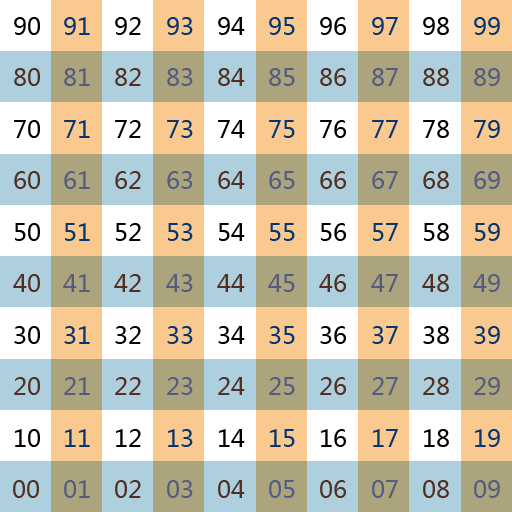
<style>
.page{position:relative;width:512px;height:512px;background:#ffffff}
.page>*{position:absolute;margin:0}
.t1{font:24px "MicrosoftYaHei";color:#000000}
.t2{font:24px "MicrosoftYaHei";color:#05366f}
.t3{font:24px "MicrosoftYaHei";color:#512f21}
.t4{font:24px "MicrosoftYaHei";color:#545b82}
</style>
<div class="page">
<p class="t1" style="left:14px;top:17px;width:26px;height:18px">90</p>
<p class="t2" style="left:64px;top:17px;width:26px;height:18px">91</p>
<p class="t1" style="left:115px;top:17px;width:26px;height:18px">92</p>
<p class="t2" style="left:167px;top:17px;width:26px;height:18px">93</p>
<p class="t1" style="left:218px;top:17px;width:27px;height:18px">94</p>
<p class="t2" style="left:269px;top:17px;width:26px;height:18px">95</p>
<p class="t1" style="left:320px;top:17px;width:26px;height:18px">96</p>
<p class="t2" style="left:372px;top:17px;width:26px;height:18px">97</p>
<p class="t1" style="left:423px;top:17px;width:26px;height:18px">98</p>
<p class="t2" style="left:474px;top:17px;width:26px;height:18px">99</p>
<p class="t3" style="left:14px;top:68px;width:26px;height:18px">80</p>
<p class="t4" style="left:64px;top:68px;width:26px;height:18px">81</p>
<p class="t3" style="left:115px;top:68px;width:26px;height:18px">82</p>
<p class="t4" style="left:167px;top:68px;width:26px;height:18px">83</p>
<p class="t3" style="left:218px;top:68px;width:27px;height:18px">84</p>
<p class="t4" style="left:269px;top:68px;width:26px;height:18px">85</p>
<p class="t3" style="left:320px;top:68px;width:26px;height:18px">86</p>
<p class="t4" style="left:372px;top:68px;width:26px;height:18px">87</p>
<p class="t3" style="left:423px;top:68px;width:26px;height:18px">88</p>
<p class="t4" style="left:474px;top:68px;width:26px;height:18px">89</p>
<p class="t1" style="left:14px;top:120px;width:26px;height:18px">70</p>
<p class="t2" style="left:64px;top:120px;width:26px;height:18px">71</p>
<p class="t1" style="left:115px;top:120px;width:26px;height:18px">72</p>
<p class="t2" style="left:167px;top:120px;width:26px;height:18px">73</p>
<p class="t1" style="left:218px;top:120px;width:27px;height:18px">74</p>
<p class="t2" style="left:269px;top:120px;width:26px;height:18px">75</p>
<p class="t1" style="left:320px;top:120px;width:26px;height:18px">76</p>
<p class="t2" style="left:372px;top:120px;width:26px;height:18px">77</p>
<p class="t1" style="left:423px;top:120px;width:26px;height:18px">78</p>
<p class="t2" style="left:474px;top:120px;width:26px;height:18px">79</p>
<p class="t3" style="left:14px;top:171px;width:26px;height:18px">60</p>
<p class="t4" style="left:64px;top:171px;width:26px;height:18px">61</p>
<p class="t3" style="left:115px;top:171px;width:26px;height:18px">62</p>
<p class="t4" style="left:167px;top:171px;width:26px;height:18px">63</p>
<p class="t3" style="left:218px;top:171px;width:27px;height:18px">64</p>
<p class="t4" style="left:269px;top:171px;width:26px;height:18px">65</p>
<p class="t3" style="left:320px;top:171px;width:26px;height:18px">66</p>
<p class="t4" style="left:372px;top:171px;width:26px;height:18px">67</p>
<p class="t3" style="left:423px;top:171px;width:26px;height:18px">68</p>
<p class="t4" style="left:474px;top:171px;width:26px;height:18px">69</p>
<p class="t1" style="left:15px;top:223px;width:25px;height:18px">50</p>
<p class="t2" style="left:65px;top:223px;width:25px;height:18px">51</p>
<p class="t1" style="left:116px;top:223px;width:25px;height:18px">52</p>
<p class="t2" style="left:168px;top:223px;width:25px;height:18px">53</p>
<p class="t1" style="left:219px;top:223px;width:26px;height:18px">54</p>
<p class="t2" style="left:270px;top:223px;width:25px;height:18px">55</p>
<p class="t1" style="left:321px;top:223px;width:25px;height:18px">56</p>
<p class="t2" style="left:373px;top:223px;width:25px;height:18px">57</p>
<p class="t1" style="left:424px;top:223px;width:25px;height:18px">58</p>
<p class="t2" style="left:475px;top:223px;width:25px;height:18px">59</p>
<p class="t3" style="left:13px;top:274px;width:27px;height:18px">40</p>
<p class="t4" style="left:63px;top:274px;width:27px;height:18px">41</p>
<p class="t3" style="left:114px;top:274px;width:27px;height:18px">42</p>
<p class="t4" style="left:166px;top:274px;width:27px;height:18px">43</p>
<p class="t3" style="left:217px;top:274px;width:28px;height:18px">44</p>
<p class="t4" style="left:268px;top:274px;width:27px;height:18px">45</p>
<p class="t3" style="left:319px;top:274px;width:27px;height:18px">46</p>
<p class="t4" style="left:371px;top:274px;width:27px;height:18px">47</p>
<p class="t3" style="left:422px;top:274px;width:27px;height:18px">48</p>
<p class="t4" style="left:473px;top:274px;width:27px;height:18px">49</p>
<p class="t1" style="left:14px;top:326px;width:26px;height:18px">30</p>
<p class="t2" style="left:64px;top:326px;width:26px;height:18px">31</p>
<p class="t1" style="left:115px;top:326px;width:26px;height:18px">32</p>
<p class="t2" style="left:167px;top:326px;width:26px;height:18px">33</p>
<p class="t1" style="left:218px;top:326px;width:27px;height:18px">34</p>
<p class="t2" style="left:269px;top:326px;width:26px;height:18px">35</p>
<p class="t1" style="left:320px;top:326px;width:26px;height:18px">36</p>
<p class="t2" style="left:372px;top:326px;width:26px;height:18px">37</p>
<p class="t1" style="left:423px;top:326px;width:26px;height:18px">38</p>
<p class="t2" style="left:474px;top:326px;width:26px;height:18px">39</p>
<p class="t3" style="left:14px;top:377px;width:26px;height:18px">20</p>
<p class="t4" style="left:64px;top:377px;width:26px;height:18px">21</p>
<p class="t3" style="left:115px;top:377px;width:26px;height:18px">22</p>
<p class="t4" style="left:167px;top:377px;width:26px;height:18px">23</p>
<p class="t3" style="left:218px;top:377px;width:27px;height:18px">24</p>
<p class="t4" style="left:269px;top:377px;width:26px;height:18px">25</p>
<p class="t3" style="left:320px;top:377px;width:26px;height:18px">26</p>
<p class="t4" style="left:372px;top:377px;width:26px;height:18px">27</p>
<p class="t3" style="left:423px;top:377px;width:26px;height:18px">28</p>
<p class="t4" style="left:474px;top:377px;width:26px;height:18px">29</p>
<p class="t1" style="left:15px;top:429px;width:25px;height:18px">10</p>
<p class="t2" style="left:65px;top:429px;width:25px;height:18px">11</p>
<p class="t1" style="left:116px;top:429px;width:25px;height:18px">12</p>
<p class="t2" style="left:168px;top:429px;width:25px;height:18px">13</p>
<p class="t1" style="left:219px;top:429px;width:26px;height:18px">14</p>
<p class="t2" style="left:270px;top:429px;width:25px;height:18px">15</p>
<p class="t1" style="left:321px;top:429px;width:25px;height:18px">16</p>
<p class="t2" style="left:373px;top:429px;width:25px;height:18px">17</p>
<p class="t1" style="left:424px;top:429px;width:25px;height:18px">18</p>
<p class="t2" style="left:475px;top:429px;width:25px;height:18px">19</p>
<p class="t3" style="left:13px;top:480px;width:26px;height:18px">00</p>
<p class="t4" style="left:64px;top:480px;width:26px;height:18px">01</p>
<p class="t3" style="left:115px;top:480px;width:26px;height:18px">02</p>
<p class="t4" style="left:167px;top:480px;width:26px;height:18px">03</p>
<p class="t3" style="left:218px;top:480px;width:27px;height:18px">04</p>
<p class="t4" style="left:269px;top:480px;width:26px;height:18px">05</p>
<p class="t3" style="left:320px;top:480px;width:26px;height:18px">06</p>
<p class="t4" style="left:372px;top:480px;width:26px;height:18px">07</p>
<p class="t3" style="left:423px;top:480px;width:26px;height:18px">08</p>
<p class="t4" style="left:474px;top:480px;width:26px;height:18px">09</p>
</div>
